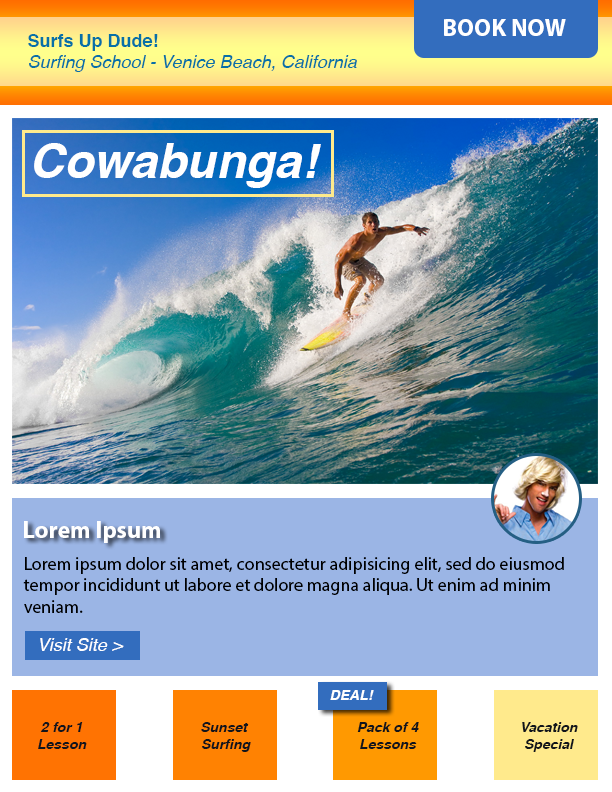
<style>
.page{position:relative;width:612px;height:792px}
.page>*{position:absolute;margin:0}
.t1{font:24px "MyriadPro-Bold";color:#ffffff}
.t2{font:18px "Helvetica-Oblique";color:#0770a7}
.t3{font:18px "Helvetica-Bold";color:#0770a7}
.t4{font:48px "Helvetica-BoldOblique";color:#ffffff}
.t5{font:18px "MyriadPro-Regular";color:#000000}
.t6{font:18px "Helvetica-Oblique";color:#ffffff}
.t7{font:14px "Helvetica-BoldOblique";color:#ffffff}
.t8{font:14px "Helvetica-BoldOblique";color:#11151c}
</style>
<div class="page">
<p class="t1" style="left:444px;top:19px;width:122px;height:17px">BOOK NOW</p>
<p class="t2" style="left:28px;top:34px;width:329px;height:38px"><span class="t3">Surfs Up Dude!<br></span>Surfing School - Venice Beach, California</p>
<p class="t4" style="left:34px;top:143px;width:287px;height:45px">Cowabunga!</p>
<p class="t1" style="left:24px;top:521px;width:136px;height:22px">Lorem Ipsum</p>
<p class="t5" style="left:23px;top:557px;width:541px;height:56px">Lorem ipsum dolor sit amet, consectetur adipisicing elit, sed do eiusmod tempor incididunt ut labore et dolore magna aliqua. Ut enim ad minim veniam.</p>
<p class="t6" style="left:40px;top:638px;width:84px;height:13px">Visit Site &gt;</p>
<p class="t7" style="left:330px;top:690px;width:44px;height:10px">DEAL!</p>
<p class="t8" style="left:38px;top:722px;width:49px;height:27px;text-align:center">2 for 1<br>Lesson</p>
<p class="t8" style="left:201px;top:722px;width:50px;height:30px;text-align:center">Sunset <br>Surfing</p>
<p class="t8" style="left:357px;top:722px;width:62px;height:27px;text-align:center">Pack of 4<br>Lessons</p>
<p class="t8" style="left:522px;top:722px;width:56px;height:30px;text-align:center">Vacation<br>Special</p>
</div>
